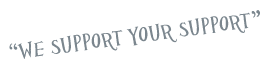
<style>
.page{position:relative;width:273px;height:65px;background:#ffffff}
.page>*{position:absolute;margin:0}
.t1{font:24px "HPPSG";color:#7b868e}
</style>
<div class="page">
<p class="t1" style="left:9px;top:10px;width:251px;height:49px;rotate:-8deg">“we support your support”</p>
</div>
